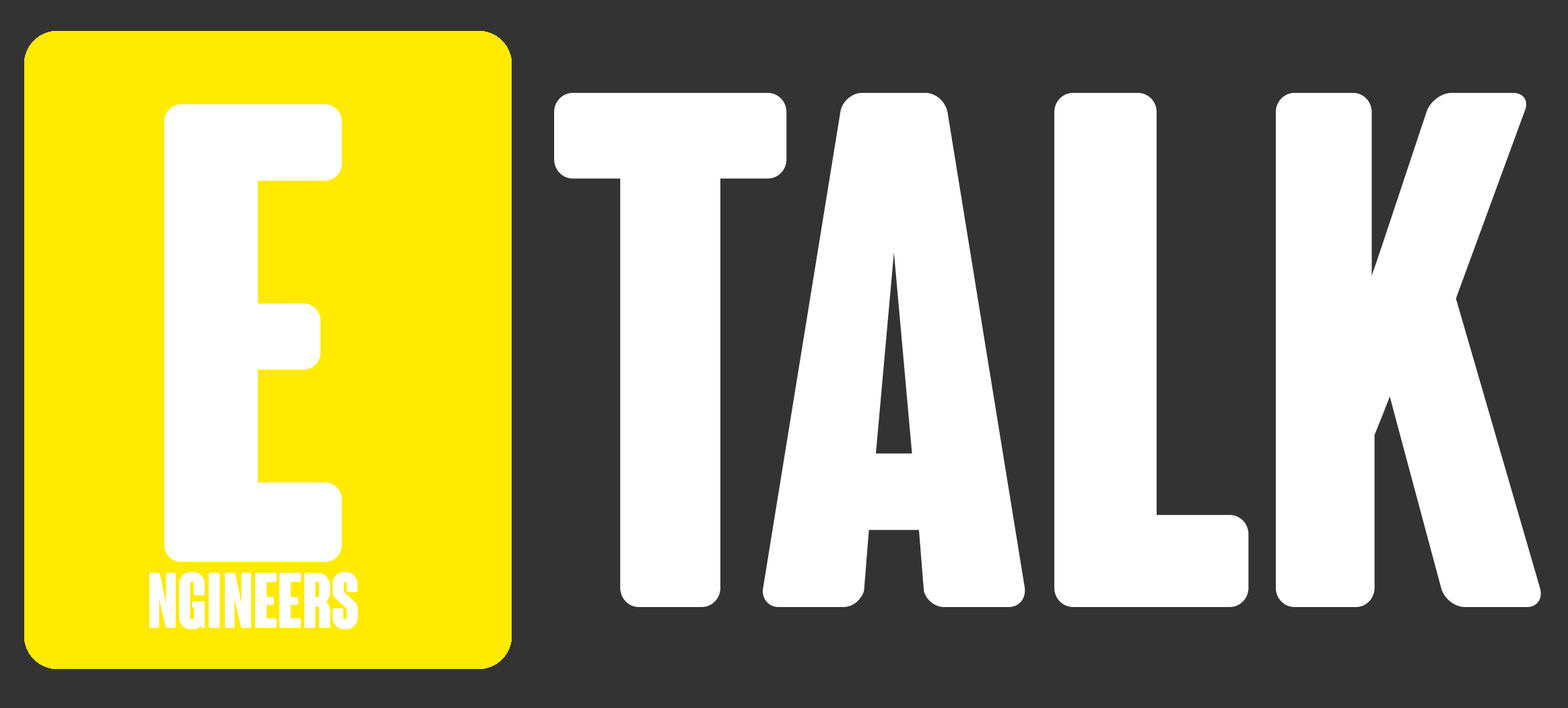
<style>
.page{position:relative;width:1568px;height:708px;background:#333333}
.page>*{position:absolute;margin:0}
.t1{font:636.2px "ColunaRounded-CondensedBold";color:#ffffff}
.t2{font:76.9px "ColunaRounded-CondensedBold";color:#ffffff}
</style>
<div class="page">
<p class="t1" style="left:164px;top:104px;width:178px;height:458px">e</p>
<p class="t2" style="left:149px;top:572px;width:209px;height:57px">ngineers</p>
</div>
